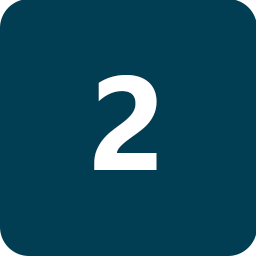
<style>
.page{position:relative;width:256px;height:256px;background:#013e54}
.page>*{position:absolute;margin:0}
.t1{font:133.3px "LeelawadeeUI-Bold";color:#ffffff}
</style>
<div class="page">
<p class="t1" style="left:94px;top:75px;width:63px;height:95px">2</p>
</div>
